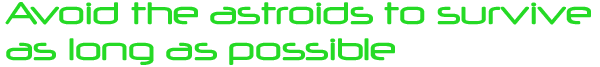
<style>
.page{position:relative;width:600px;height:67px;background:#ffffff}
.page>*{position:absolute;margin:0}
.t1{font:37px/36.1px "Neuropol";color:#25da25}
</style>
<div class="page">
<p class="t1" style="left:5px;top:2px;width:586px;height:63px">Avoid the astroids to survive as long as possible</p>
</div>
